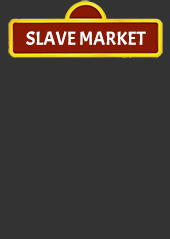
<style>
.page{position:relative;width:170px;height:239px;background:#333333}
.page>*{position:absolute;margin:0}
.t1{font:18.9px "Acme-Regular";color:#ffffff}
</style>
<div class="page">
<p class="t1" style="left:26px;top:31px;width:120px;height:14px">SLAVE MARKET</p>
</div>
